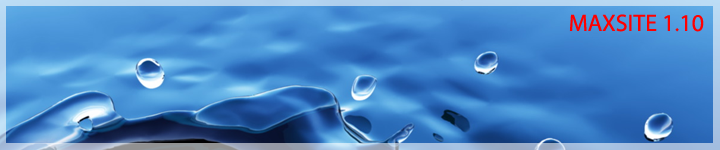
<style>
.page{position:relative;width:720px;height:150px}
.page>*{position:absolute;margin:0}
.t1{font:24px "MyriadPro-Regular";color:#ff0000}
</style>
<div class="page">
<p class="t1" style="left:569px;top:14px;width:135px;height:18px">MAXSITE 1.10</p>
</div>
